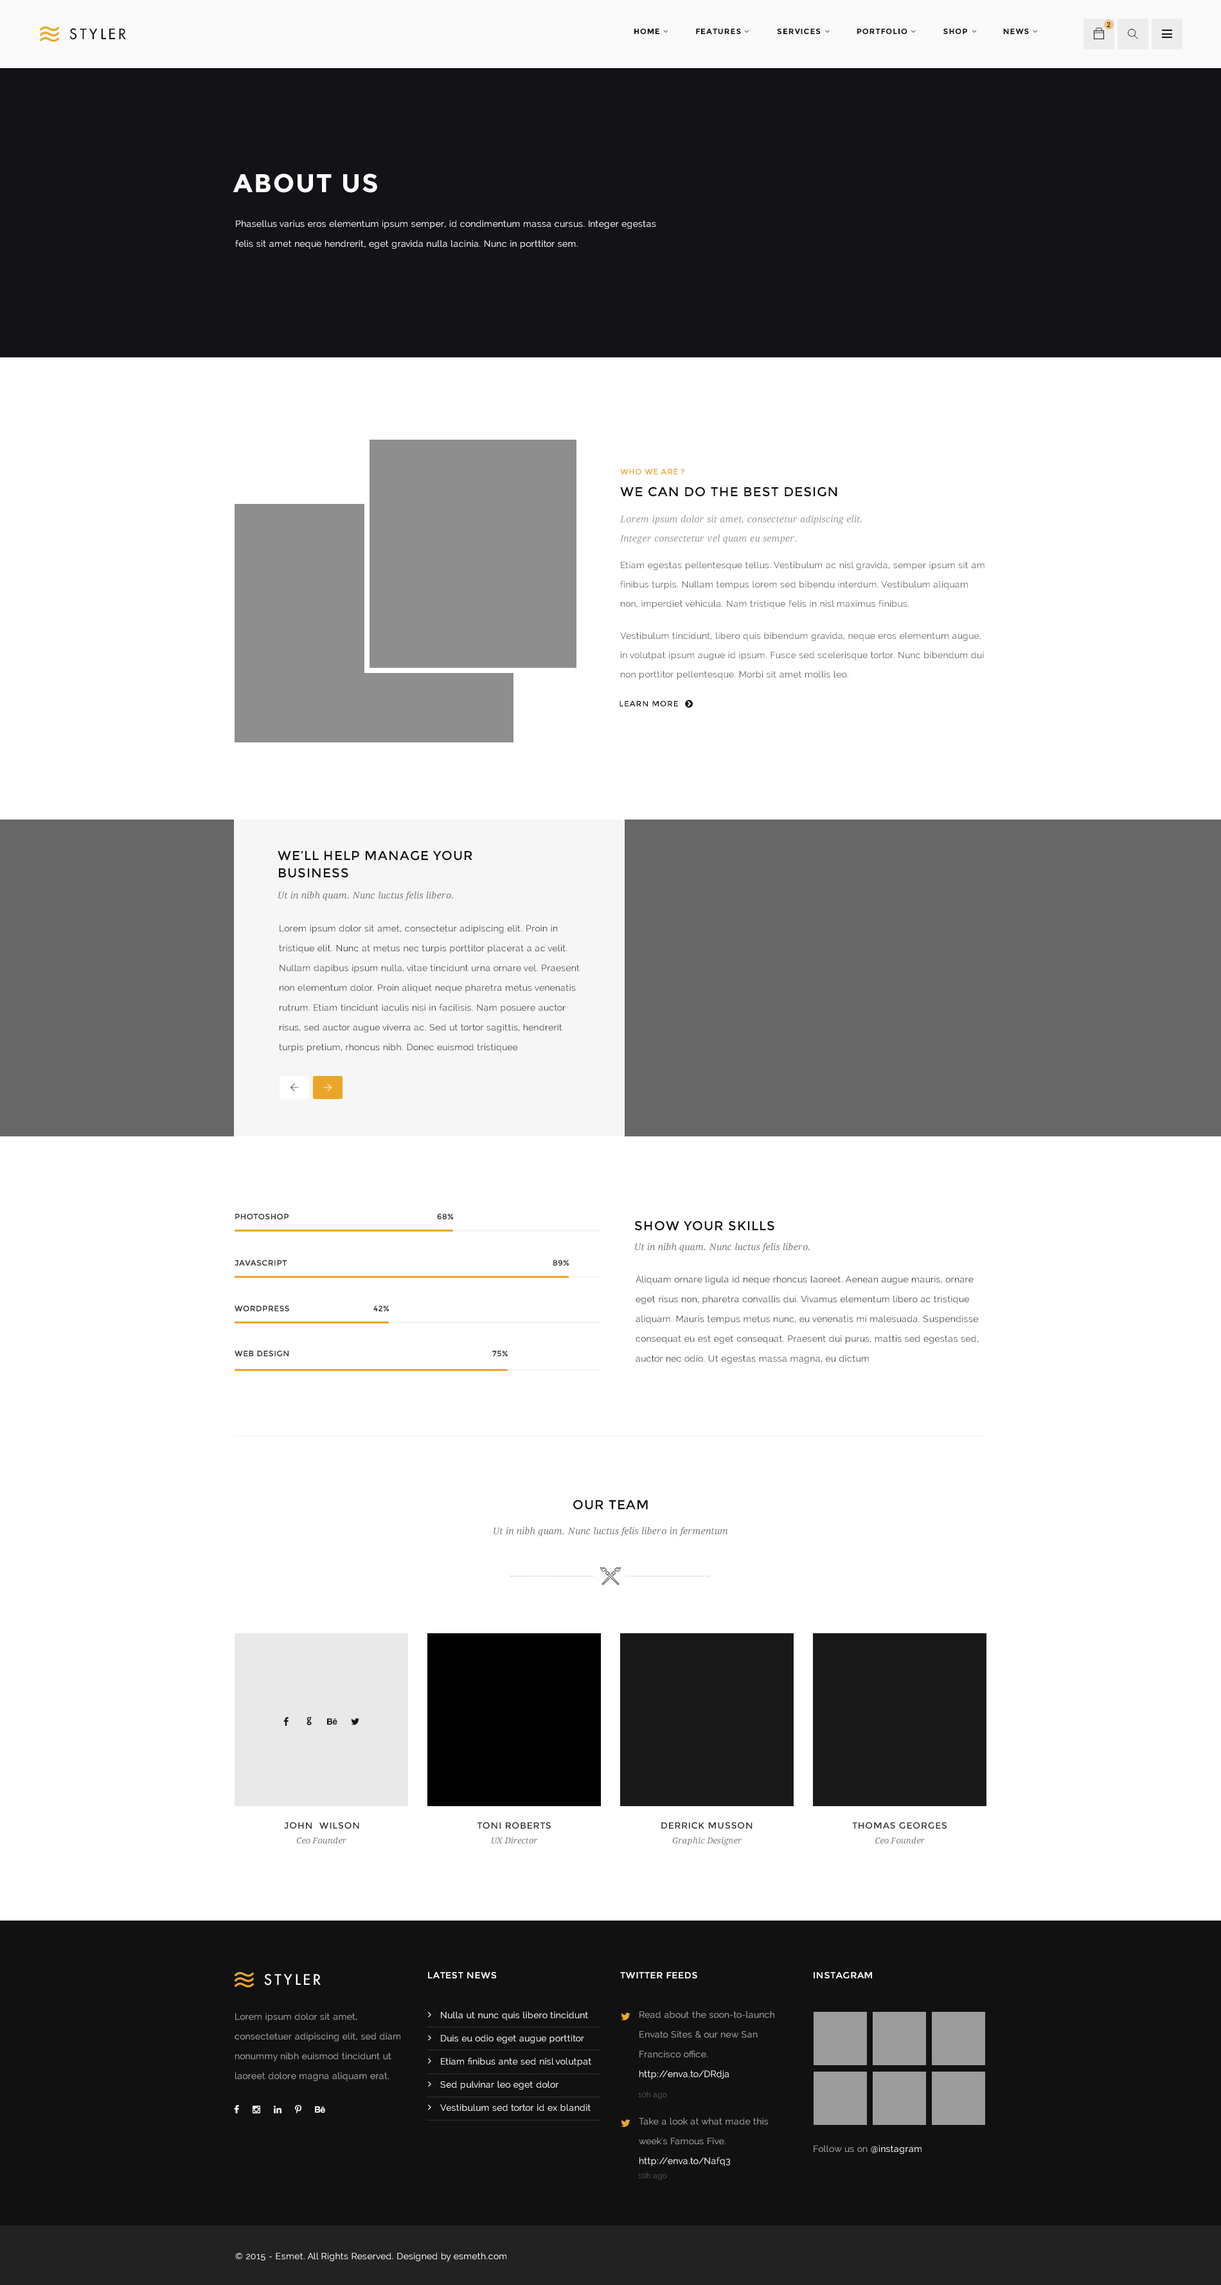
<style>
.page{position:relative;width:1221px;height:2285px;background:#ffffff}
.page>*{position:absolute;margin:0}
.t1{font:14.1px "FuturaLT";letter-spacing:0.2em;color:#111111;text-transform:uppercase}
.t2{font:7.7px "Montserrat-Bold";letter-spacing:0.075em;color:#111111;text-transform:uppercase}
.t3{font:7.1px "Montserrat-Regular";letter-spacing:0.075em;color:#111111;text-transform:uppercase}
.t4{font:25.7px "Montserrat-Bold";letter-spacing:0.05em;color:#ffffff;text-transform:uppercase}
.t5{font:9px/19.8px "Raleway";letter-spacing:0.02em;color:#ffffff}
.t6{font:7.7px "Montserrat-Regular";letter-spacing:0.05em;color:#eba62a;text-transform:uppercase}
.t7{font:12.9px "Montserrat-Regular";letter-spacing:0.05em;color:#111111;text-transform:uppercase}
.t8{font:9px/19.3px "DroidSerif-Italic";letter-spacing:0.02em;color:#999999}
.t9{font:9px/19.3px "Raleway";letter-spacing:0.02em;color:#555555}
.t10{font:7.7px "Montserrat-Regular";letter-spacing:0.075em;color:#111111;text-transform:uppercase}
.t11{font:12.9px/17.4px "Montserrat-Regular";letter-spacing:0.05em;color:#111111;text-transform:uppercase}
.t12{font:9px "DroidSerif-Italic";letter-spacing:0.02em;color:#777777}
.t13{font:9px/19.8px "Raleway";letter-spacing:0.02em;color:#333333}
.t14{font:7.7px "Montserrat-Regular";letter-spacing:0.05em;color:#333333;text-transform:uppercase}
.t15{font:7.7px "Montserrat-Regular";letter-spacing:0.05em;color:#333333}
.t16{font:14.1px "Socialico";letter-spacing:0.02em;color:#111111}
.t17{font:9px "Montserrat-Regular";letter-spacing:0.05em;color:#333333;text-transform:uppercase}
.t18{font:8.4px "DroidSerif-Italic";letter-spacing:0.02em;color:#777777}
.t19{font:9px "Montserrat-Regular";letter-spacing:0.05em;color:#ffffff;text-transform:uppercase}
.t20{font:14.1px "FuturaLT";letter-spacing:0.2em;color:#ffffff;text-transform:uppercase}
.t21{font:9px/19.8px "Raleway";letter-spacing:0.02em;color:#a9a9a9}
.t22{font:9px/23.1px "Raleway";letter-spacing:0.02em;color:#ffffff}
.t23{font:7.7px "Raleway";letter-spacing:0.02em;color:#545454}
.t24{font:9px "Raleway";letter-spacing:0.02em;color:#a9a9a9}
.t25{font:9px "Raleway";letter-spacing:0.02em;color:#ffffff}
</style>
<div class="page">
<p class="t1" style="left:69px;top:28px;width:57px;height:12px">styler</p>
<p class="t2" style="left:634px;top:28px;width:395px;height:6px">HOME              FEATURES              SERVICES              portfolio              SHOP              NEWS</p>
<p class="t3" style="left:1107px;top:22px;width:4px;height:6px">2</p>
<p class="t4" style="left:233px;top:174px;width:144px;height:19px">about us</p>
<p class="t5" style="left:235px;top:220px;width:421px;height:29px">Phasellus varius eros elementum ipsum semper, id condimentum massa cursus. Integer egestas felis sit amet neque hendrerit, eget gravida nulla lacinia. Nunc in porttitor sem.</p>
<p class="t6" style="left:620px;top:469px;width:65px;height:5px">who we are ?</p>
<p class="t7" style="left:620px;top:487px;width:218px;height:10px">we can do the best design</p>
<p class="t8" style="left:620px;top:515px;width:242px;height:29px">Lorem ipsum dolor sit amet, consectetur adipiscing elit.<br>Integer consectetur vel quam eu semper.</p>
<p class="t9" style="left:620px;top:561px;width:365px;height:119px">Etiam egestas pellentesque tellus. Vestibulum ac nisl gravida, semper ipsum sit am<br>finibus turpis. Nullam tempus lorem sed bibendu interdum. Vestibulum aliquam non, imperdiet vehicula. Nam tristique felis in nisl maximus finibus.<br><br>Vestibulum tincidunt, libero quis bibendum gravida, neque eros elementum augue, in volutpat ipsum augue id ipsum. Fusce sed scelerisque tortor. Nunc bibendum dui non porttitor pellentesque. Morbi sit amet mollis leo.</p>
<p class="t10" style="left:620px;top:701px;width:58px;height:5px">Learn more</p>
<p class="t11" style="left:278px;top:851px;width:195px;height:27px">we’ll help manage your<br>business</p>
<p class="t12" style="left:278px;top:892px;width:175px;height:9px">Ut in nibh quam. Nunc luctus felis libero.</p>
<p class="t13" style="left:279px;top:925px;width:301px;height:127px">Lorem ipsum dolor sit amet, consectetur adipiscing elit. Proin in tristique elit. Nunc at metus nec turpis porttitor placerat a ac velit. Nullam dapibus ipsum nulla, vitae tincidunt urna ornare vel. Praesent non elementum dolor. Proin aliquet neque pharetra metus venenatis rutrum. Etiam tincidunt iaculis nisi in facilisis. Nam posuere auctor risus, sed auctor augue viverra ac. Sed ut tortor sagittis, hendrerit turpis pretium, rhoncus nibh. Donec euismod tristiquee</p>
<p class="t14" style="left:235px;top:1214px;width:54px;height:6px">photoshop</p>
<p class="t15" style="left:437px;top:1214px;width:17px;height:6px">68%</p>
<p class="t7" style="left:634px;top:1221px;width:141px;height:10px">Show your skills</p>
<p class="t12" style="left:635px;top:1243px;width:175px;height:9px">Ut in nibh quam. Nunc luctus felis libero.</p>
<p class="t14" style="left:235px;top:1260px;width:52px;height:6px">Javascript</p>
<p class="t15" style="left:553px;top:1260px;width:17px;height:6px">89%</p>
<p class="t13" style="left:636px;top:1276px;width:342px;height:88px">Aliquam ornare ligula id neque rhoncus laoreet. Aenean augue mauris, ornare eget risus non, pharetra convallis dui. Vivamus elementum libero ac tristique aliquam. Mauris tempus metus nunc, eu venenatis mi malesuada. Suspendisse consequat eu est eget consequat. Praesent dui purus, mattis sed egestas sed, auctor nec odio. Ut egestas massa magna, eu dictum</p>
<p class="t14" style="left:235px;top:1306px;width:54px;height:6px">Wordpress</p>
<p class="t15" style="left:374px;top:1306px;width:16px;height:6px">42%</p>
<p class="t14" style="left:235px;top:1351px;width:54px;height:6px">web design</p>
<p class="t15" style="left:492px;top:1351px;width:17px;height:6px">75%</p>
<p class="t7" style="left:573px;top:1500px;width:75px;height:10px">our team</p>
<p class="t12" style="left:494px;top:1527px;width:234px;height:9px">Ut in nibh quam. Nunc luctus felis libero in fermentum</p>
<p class="t16" style="left:284px;top:1717px;width:5px;height:9px">F</p>
<p class="t16" style="left:307px;top:1716px;width:5px;height:9px">G</p>
<p class="t16" style="left:327px;top:1718px;width:11px;height:7px">E</p>
<p class="t16" style="left:351px;top:1718px;width:8px;height:7px">L</p>
<p class="t17" style="left:284px;top:1823px;width:75px;height:6px">John  Wilson</p>
<p class="t17" style="left:477px;top:1823px;width:74px;height:6px">Toni Roberts</p>
<p class="t17" style="left:662px;top:1823px;width:91px;height:6px">Derrick Musson</p>
<p class="t17" style="left:852px;top:1823px;width:96px;height:6px">Thomas georges</p>
<p class="t18" style="left:297px;top:1837px;width:49px;height:7px">Ceo Founder</p>
<p class="t18" style="left:492px;top:1837px;width:46px;height:7px">UX Director</p>
<p class="t18" style="left:672px;top:1837px;width:70px;height:9px">Graphic Designer</p>
<p class="t18" style="left:876px;top:1837px;width:49px;height:7px">Ceo Founder</p>
<p class="t19" style="left:428px;top:1972px;width:69px;height:7px">latest news</p>
<p class="t19" style="left:620px;top:1972px;width:78px;height:7px">twitter feeds</p>
<p class="t19" style="left:814px;top:1972px;width:58px;height:7px">instagram</p>
<p class="t20" style="left:264px;top:1974px;width:57px;height:12px">styler</p>
<p class="t21" style="left:235px;top:2013px;width:166px;height:69px">Lorem ipsum dolor sit amet, consectetuer adipiscing elit, sed diam nonummy nibh euismod tincidunt ut laoreet dolore magna aliquam erat.</p>
<p class="t22" style="left:440px;top:2012px;width:151px;height:100px">Nulla ut nunc quis libero tincidunt<br>Duis eu odio eget augue porttitor<br>Etiam finibus ante sed nisl volutpat<br>Sed pulvinar leo eget dolor<br>Vestibulum sed tortor id ex blandit</p>
<p class="t21" style="left:640px;top:2012px;width:135px;height:68px">Read about the soon-to-launch Envato Sites &amp; our new San Francisco office. <span class="t5">http://enva.to/DRdja</span></p>
<p class="t23" style="left:638px;top:2092px;width:29px;height:8px">10h ago</p>
<p class="t21" style="left:639px;top:2118px;width:129px;height:48px">Take a look at what made this week's Famous Five. <span class="t5">http://enva.to/Nafq3</span></p>
<p class="t24" style="left:814px;top:2145px;width:108px;height:9px">Follow us on <span class="t25">@instagram</span></p>
<p class="t23" style="left:638px;top:2173px;width:29px;height:8px">10h ago</p>
<p class="t25" style="left:235px;top:2253px;width:272px;height:9px">© 2015 - Esmet. All Rights Reserved. Designed by esmeth.com</p>
</div>
